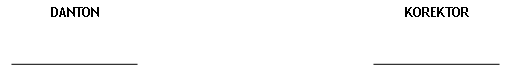
<style>
.page{position:relative;width:512px;height:73px;background:#ffffff}
.page>*{position:absolute;margin:0}
.t1{font:12.7px "TrebuchetMS-Bold";color:#000000}
</style>
<div class="page">
<p class="t1" style="left:51px;top:7px;width:48px;height:10px">DANTON</p>
<p class="t1" style="left:405px;top:7px;width:64px;height:10px">KOREKTOR</p>
</div>
